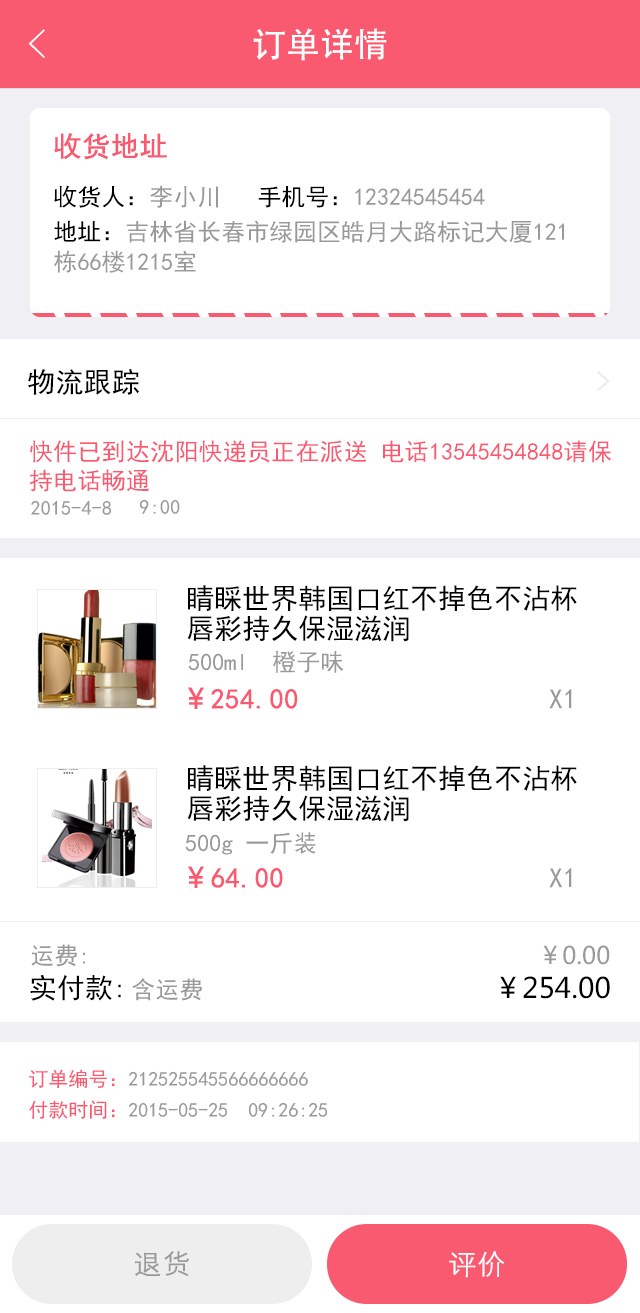
<style>
.page{position:relative;width:640px;height:1313px;background:#ffffff}
.page>*{position:absolute;margin:0}
.t1{font:40px "FZYXJW--GB1-0";color:#ffffff}
.t2{font:34px "AdobeHeitiStd-Regular";color:#ffffff}
.t3{font:28px "SimHei";color:#f95a70;font-weight:bold}
.t4{font:24px "SimHei";color:#999999}
.t5{font:24px "SimHei";color:#000000}
.t6{font:24px/30px "SimHei";color:#999999}
.t7{font:24px/30px "SimHei";color:#000000}
.t8{font:28px "SimHei";letter-spacing:0.01em;color:#000000}
.t9{font:28px "¿¬Ìå";color:#eeeeee;font-weight:bold}
.t10{font:24px "SimHei";letter-spacing:0.01em;color:#f95a70}
.t11{font:20px "SimHei";letter-spacing:0.01em;color:#999999}
.t12{font:28px/30px "SimHei";color:#000000}
.t13{font:28px "MicrosoftYaHei";color:#f95a70;font-weight:bold}
.t14{font:28px "SimHei";color:#999999}
.t15{font:24px "MicrosoftYaHei";color:#999999}
.t16{font:28px "SimHei";color:#000000}
.t17{font:28px "MicrosoftYaHei";color:#000000}
.t18{font:20px "SimHei";color:#999999}
.t19{font:20px "SimHei";color:#f95a70}
.t20{font:28px "FZXH1JW--GB1-0";color:#999999;font-weight:bold}
.t21{font:28px "FZXH1JW--GB1-0";color:#ffffff;font-weight:bold}
</style>
<div class="page">
<p class="t1" style="left:28px;top:29px;width:17px;height:29px">&lt;</p>
<p class="t2" style="left:253px;top:28px;width:134px;height:33px">订单详情</p>
<p class="t2" style="left:253px;top:28px;width:134px;height:33px">订单详情</p>
<p class="t3" style="left:54px;top:133px;width:113px;height:27px">收货地址</p>
<p class="t4" style="left:54px;top:185px;width:431px;height:23px"><span class="t5">收货人：</span>李小川 <span class="t5">  手机号：</span>12324545454</p>
<p class="t6" style="left:54px;top:220px;width:510px;height:53px"><span class="t7">地址：</span>吉林省长春市绿园区皓月大路标记大厦121<br>栋66楼1215室</p>
<p class="t8" style="left:28px;top:369px;width:111px;height:26px">物流跟踪</p>
<p class="t9" style="left:596px;top:370px;width:14px;height:22px">&gt;</p>
<p class="t10" style="left:29px;top:440px;width:582px;height:52px">快件已到达沈阳快递员正在派送 电话13545454848请保<br>持电话畅通</p>
<p class="t11" style="left:31px;top:500px;width:81px;height:15px">2015-4-8</p>
<p class="t11" style="left:139px;top:499px;width:41px;height:15px">9:00</p>
<p class="t12" style="left:187px;top:585px;width:390px;height:57px">睛睬世界韩国口红不掉色不沾杯<br>唇彩持久保湿滋润</p>
<p class="t4" style="left:188px;top:651px;width:156px;height:22px">500ml  橙子味</p>
<p class="t3" style="left:188px;top:687px;width:110px;height:22px"><span class="t13">￥</span>254.00</p>
<p class="t14" style="left:549px;top:689px;width:23px;height:20px">X1</p>
<p class="t12" style="left:187px;top:765px;width:390px;height:57px">睛睬世界韩国口红不掉色不沾杯<br>唇彩持久保湿滋润</p>
<p class="t4" style="left:185px;top:832px;width:131px;height:23px">500g 一斤装</p>
<p class="t3" style="left:188px;top:866px;width:95px;height:22px"><span class="t13">￥</span>64.00</p>
<p class="t14" style="left:549px;top:868px;width:23px;height:20px">X1</p>
<p class="t4" style="left:31px;top:944px;width:54px;height:23px">运费:</p>
<p class="t15" style="left:543px;top:945px;width:67px;height:20px">￥0.00</p>
<p class="t16" style="left:30px;top:974px;width:91px;height:27px">实付款:</p>
<p class="t17" style="left:500px;top:976px;width:110px;height:23px">￥254.00</p>
<p class="t4" style="left:132px;top:978px;width:70px;height:23px">含运费</p>
<p class="t18" style="left:29px;top:1069px;width:279px;height:20px"><span class="t19">订单编号：</span>212525545566666666</p>
<p class="t18" style="left:29px;top:1100px;width:299px;height:19px"><span class="t19">付款时间：</span>2015-05-25  09:26:25</p>
<p class="t20" style="left:135px;top:1251px;width:54px;height:25px">退货</p>
<p class="t21" style="left:449px;top:1251px;width:56px;height:27px">评价</p>
</div>
